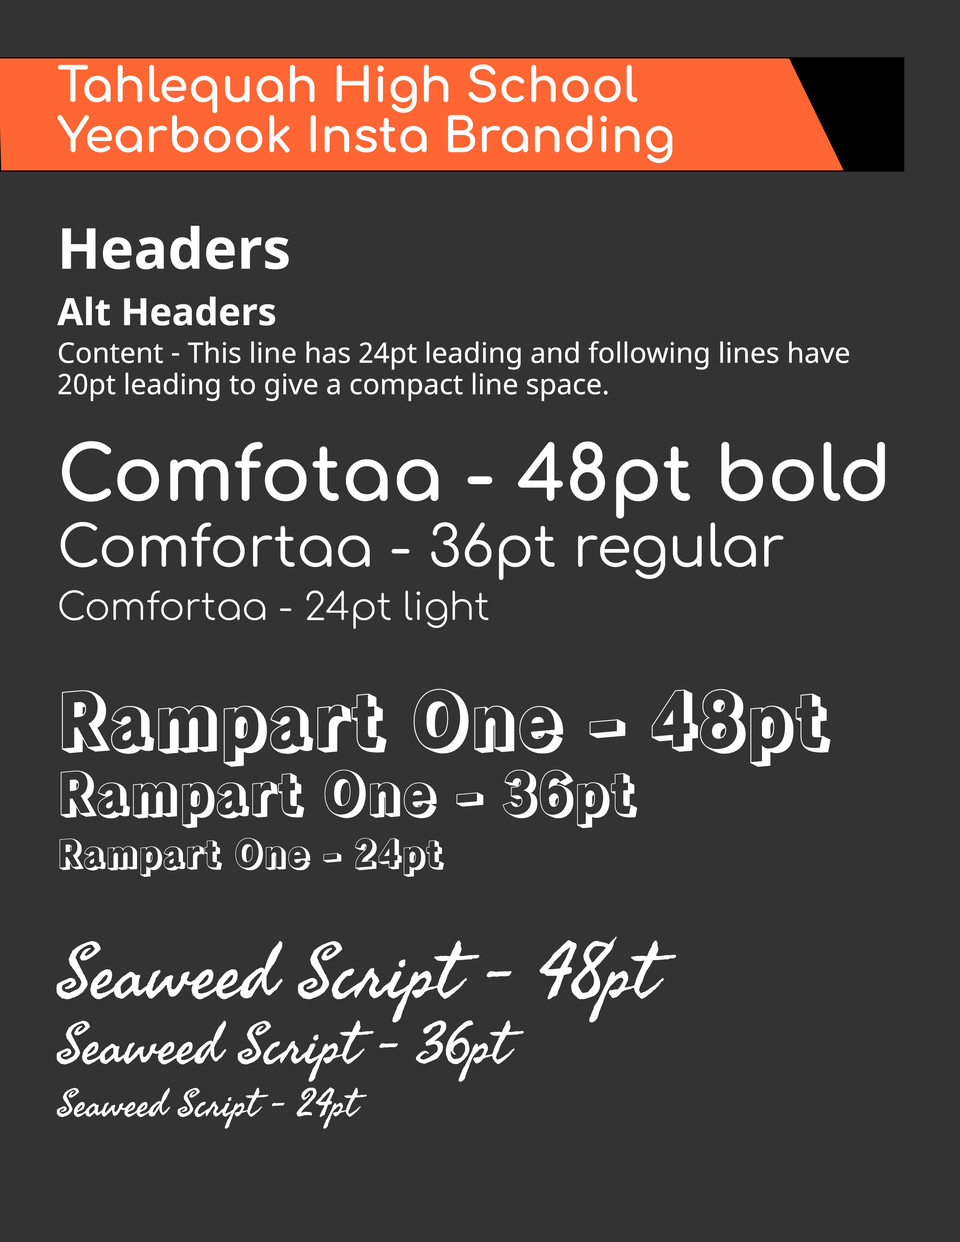
<style>
.page{position:relative;width:960px;height:1242px;background:#333333}
.page>*{position:absolute;margin:0}
.t1{font:47.4px/50.2px "Comfortaa-Bold";color:#ffffff}
.t2{font:28.2px/37.6px "NotoSans";color:#ffffff}
.t3{font:56.5px/56.5px "NotoSans-Bold";color:#ffffff}
.t4{font:37.6px/56.5px "NotoSans-Bold";color:#ffffff}
.t5{font:28.2px/28.2px "NotoSans";color:#ffffff}
.t6{font:28.2px/31.4px "NotoSans";color:#ffffff}
.t7{font:75.3px/75.3px "Comfortaa-Bold";color:#ffffff}
.t8{font:56.5px/65.9px "Comfortaa-Regular";color:#ffffff}
.t9{font:37.6px/53.3px "Comfortaa-Light";color:#ffffff}
.t10{font:75.3px/75.3px "RampartOne-Regular";color:#ffffff}
.t11{font:56.5px/65.9px "RampartOne-Regular";color:#ffffff}
.t12{font:37.6px/53.3px "RampartOne-Regular";color:#ffffff}
.t13{font:75.3px/75.3px "SeaweedScript-Regular";color:#ffffff}
.t14{font:56.5px/65.9px "SeaweedScript-Regular";color:#ffffff}
.t15{font:37.6px/53.3px "SeaweedScript-Regular";color:#ffffff}
</style>
<div class="page">
<p class="t1" style="left:57px;top:64px;width:615px;height:99px">Tahlequah High School<br>Yearbook Insta Branding</p>
<p class="t2" style="left:56px;top:226px;width:829px;height:903px"><span class="t3">Headers<br></span><span class="t4">Alt Headers<br></span><span class="t5">C</span>ontent - This line has 24pt leading and following lines <span class="t6">have 20pt leading to give a compact line space.<br><br></span><span class="t7">Comfotaa - 48pt bold<br></span><span class="t8">Comfortaa - 36pt regular<br></span><span class="t9">Comfortaa - 24pt light<br><br></span><span class="t10">Rampart One - 48pt<br></span><span class="t11">Rampart One - 36pt<br></span><span class="t12">Rampart One - 24pt<br><br></span><span class="t13">Seaweed Script - 48pt<br></span><span class="t14">Seaweed Script - 36pt<br></span><span class="t15">Seaweed Script - 24pt</span></p>
</div>
